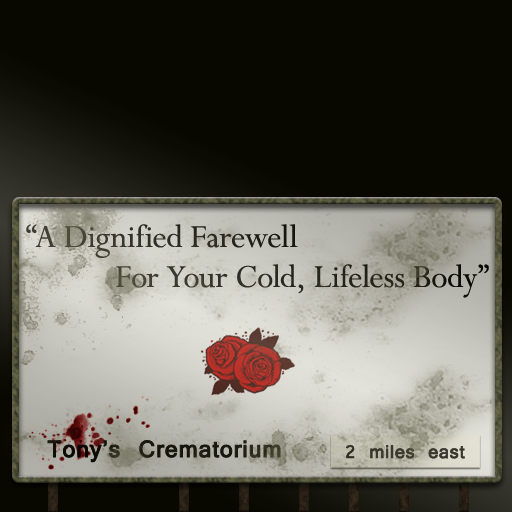
<style>
.page{position:relative;width:512px;height:512px;background:#090800}
.page>*{position:absolute;margin:0}
.t1{font:36px "Perpetua";letter-spacing:-0.01em;color:#302f27}
.t2{font:36px "Perpetua";letter-spacing:-0.01em;color:#2a2a20}
.t3{font:36px "Kartika";letter-spacing:0.005em;color:#19180f;font-weight:bold}
.t4{font:27px "Vrinda";letter-spacing:0.005em;color:#39382e;font-weight:bold}
</style>
<div class="page">
<p class="t1" style="left:26px;top:224px;width:272px;height:34px">“A Dignified Farewell</p>
<p class="t2" style="left:116px;top:264px;width:373px;height:34px">For Your Cold, Lifeless Body”</p>
<p class="t3" style="left:47px;top:440px;width:234px;height:23px">Tony’s Crematorium</p>
<p class="t4" style="left:346px;top:445px;width:119px;height:14px">2 miles east</p>
</div>
